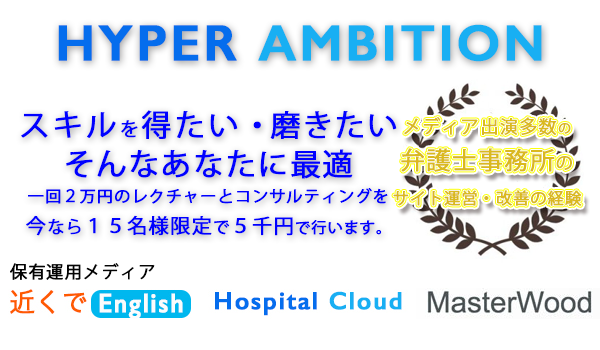
<style>
.page{position:relative;width:600px;height:350px;background:#ffffff}
.page>*{position:absolute;margin:0}
.t1{font:51px "GillSans-SemiBold";letter-spacing:0.05em;color:#18aff3;font-weight:bold}
.t2{font:51px "GillSans-SemiBold";letter-spacing:0.05em;color:#056ded;font-weight:bold}
.t3{font:16px "KozGoPr6N-Regular";letter-spacing:0.05em;color:#0000ff;font-weight:bold}
.t4{font:30px/39px "KozGoPr6N-Regular";letter-spacing:0.09em;color:#0000ff;font-weight:bold}
.t5{font:19px/39px "KozGoPr6N-Regular";letter-spacing:0.09em;color:#0000ff;font-weight:bold}
.t6{font:30px/39px "KozGoPr6N-Regular";letter-spacing:-0.07em;color:#0000ff;font-weight:bold}
.t7{font:30px/39px "KozGoPr6N-Regular";letter-spacing:0.05em;color:#0000ff;font-weight:bold}
.t8{font:20px "KozGoPr6N-Regular";letter-spacing:0.05em;color:#0000ff;font-weight:bold}
.t9{font:17px "KozGoPr6N-Regular";letter-spacing:0.05em;color:#0000ff;font-weight:bold}
.t10{font:15px "KozGoPr6N-Regular";letter-spacing:0.05em;color:#0000ff;font-weight:bold}
.t11{font:16px "KozGoPr6N-Regular";letter-spacing:0.05em;color:#dab91f;font-weight:bold}
.t12{font:18px "KozGoPr6N-Regular";letter-spacing:0.05em;color:#dab91f;font-weight:bold}
.t13{font:13px "KozGoPr6N-Regular";letter-spacing:0.05em;color:#dab91f;font-weight:bold}
.t14{font:24px "KozGoPr6N-Regular";letter-spacing:0.05em;color:#dab91f;font-weight:bold}
.t15{font:17px "KozGoPr6N-Regular";letter-spacing:0.05em;color:#dab91f;font-weight:bold}
.t16{font:17px "KozGoPr6N-Regular";letter-spacing:0.05em;color:#040404;font-weight:bold}
</style>
<div class="page">
<p class="t1" style="left:58px;top:24px;width:484px;height:38px"><span class="t2">HYPER </span>AMBITION</p>
<p class="t3" style="left:21px;top:110px;width:376px;height:126px;text-align:center"><span class="t4">スキル</span><span class="t5">を</span><span class="t4">得たい</span><span class="t6">・</span><span class="t7">磨きたい<br>そんなあなたに最適<br></span>一回２万円のレクチャーとコンサルティングを<br><span class="t8">今</span><span class="t9">なら</span><span class="t8">１５名様限定</span>で<span class="t8">５千円</span><span class="t10">で行います。</span></p>
<p class="t11" style="left:393px;top:117px;width:189px;height:89px;text-align:center"><span class="t12">メディア出演多数</span><span class="t13">の<br></span><span class="t14">弁護士事務所</span><span class="t15">の<br></span>サイト運営・改善の経験</p>
<p class="t16" style="left:10px;top:263px;width:145px;height:17px">保有運用メディア</p>
</div>
